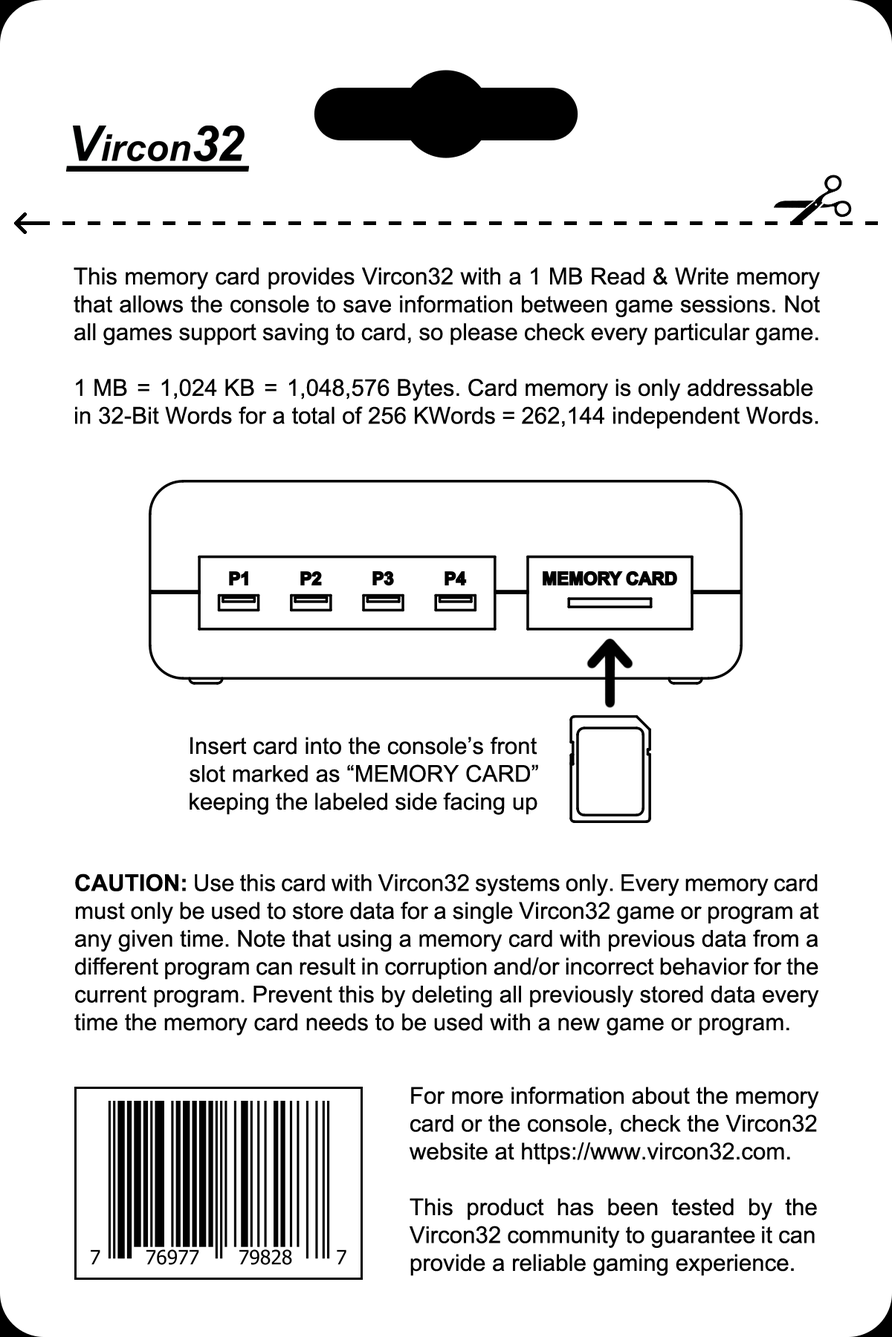
<style>
.page{position:relative;width:892px;height:1337px;background:#ffffff}
.page>*{position:absolute;margin:0}
.t1{font:23.2px "ArialMT";color:#000000}
.t2{font:23.2px "Arial-BoldMT";color:#000000}
</style>
<div class="page">
<p class="t1" style="left:74px;top:267px;width:746px;height:162px;text-align:justify">This memory card provides Vircon32 with a 1 MB Read &amp; Write memory that allows the console to save information between game sessions. Not all games support saving to card, so please check every particular game.<br><br>1 MB  =  1,024 KB  =  1,048,576 Bytes. Card memory is only addressable in 32-Bit Words for a total of 256 KWords = 262,144 independent Words.</p>
<p class="t1" style="left:189px;top:737px;width:349px;height:78px">Insert card into the console’s front<br> slot marked as “MEMORY CARD”<br>keeping the labeled side facing up</p>
<p class="t1" style="left:74px;top:874px;width:745px;height:162px;text-align:justify"><span class="t2">CAUTION:</span> Use this card with Vircon32 systems only. Every memory card must only be used to store data for a single Vircon32 game or program at any given time. Note that using a memory card with previous data from a different program can result in corruption and/or incorrect behavior for the current program. Prevent this by deleting all previously stored data every time the memory card needs to be used with a new game or program.</p>
<p class="t1" style="left:409px;top:1087px;width:410px;height:189px">For more information about the memory card or the console, check the Vircon32 website at https://www.vircon32.com.<br><br>This  product  has  been  tested  by  the Vircon32 community to guarantee it can provide a reliable gaming experience.</p>
</div>
